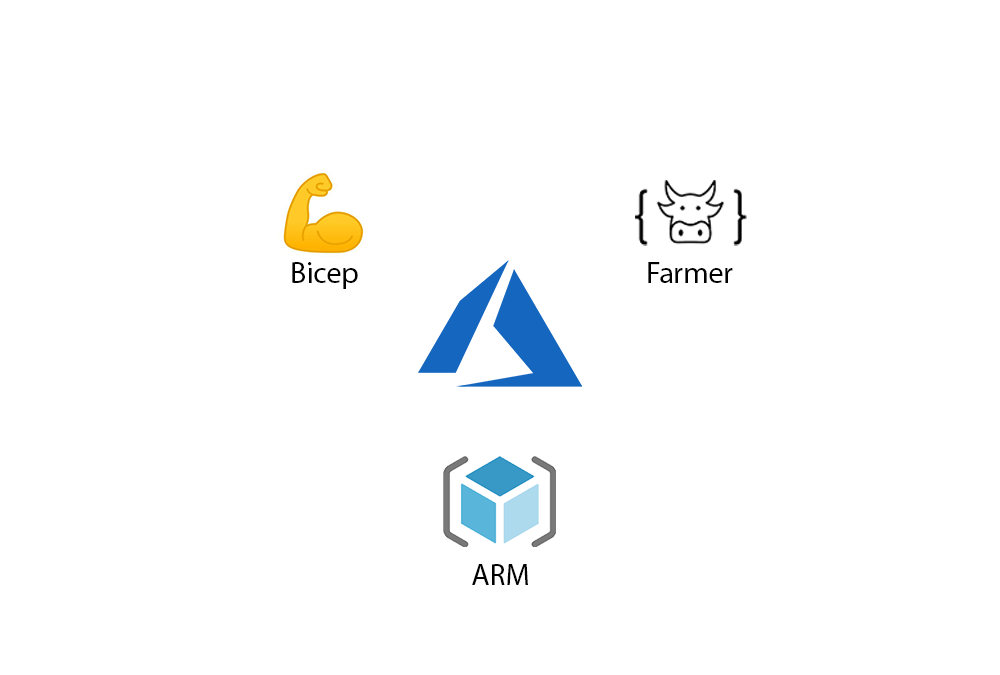
<style>
.page{position:relative;width:1000px;height:675px;background:#ffffff}
.page>*{position:absolute;margin:0}
.t1{font:30px "MyriadPro-Regular";color:#000000}
</style>
<div class="page">
<p class="t1" style="left:292px;top:262px;width:66px;height:27px">Bicep</p>
<p class="t1" style="left:648px;top:262px;width:85px;height:21px">Farmer</p>
<p class="t1" style="left:472px;top:564px;width:56px;height:21px">ARM</p>
</div>
